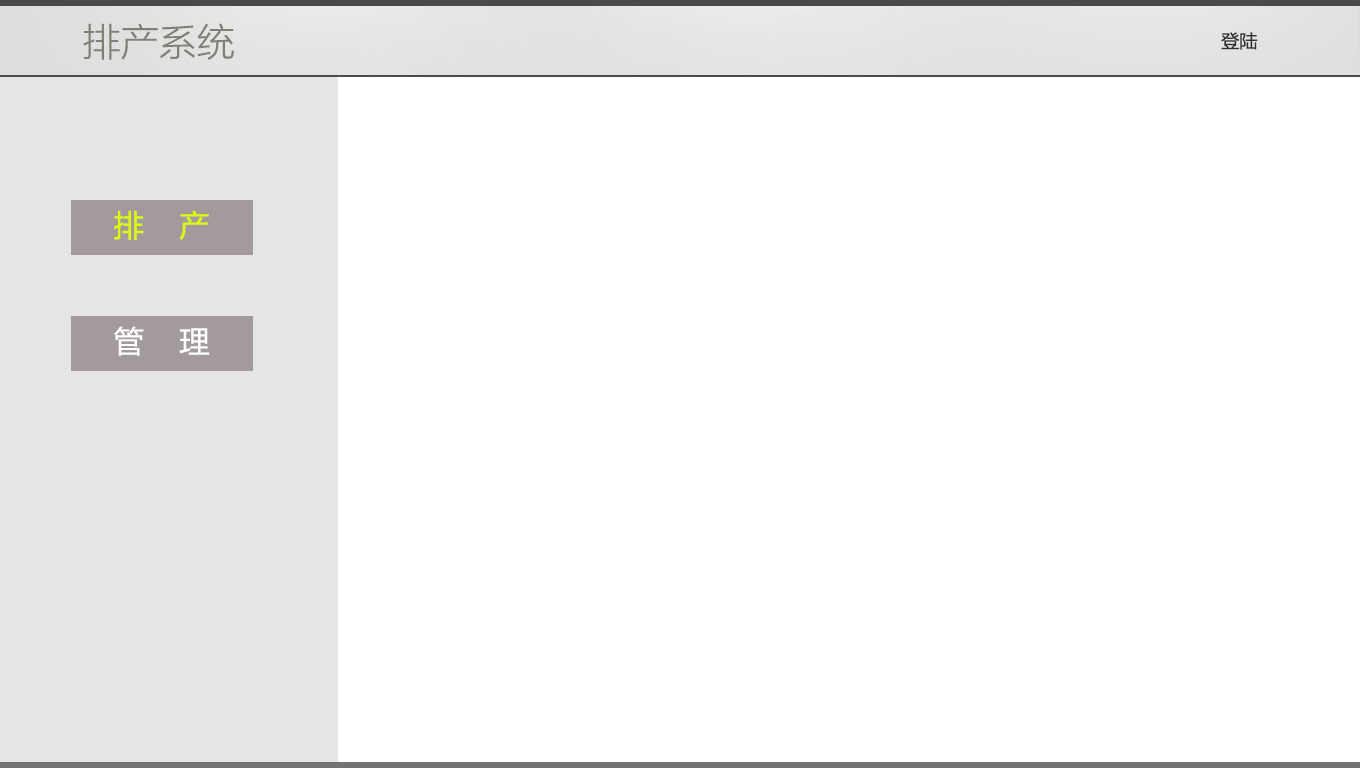
<style>
.page{position:relative;width:1360px;height:768px;background:#ffffff}
.page>*{position:absolute;margin:0}
.t1{font:38px "MicrosoftYaHeiLight";color:#808077}
.t2{font:18px "MicrosoftYaHei";color:#31312e}
.t3{font:30px "MicrosoftYaHei";color:#dcfc02}
.t4{font:30px "MicrosoftYaHei";color:#ffffff}
</style>
<div class="page">
<p class="t1" style="left:83px;top:23px;width:151px;height:37px">排产系统</p>
<p class="t2" style="left:1221px;top:32px;width:37px;height:18px">登陆</p>
<p class="t3" style="left:114px;top:210px;width:95px;height:30px">排    产</p>
<p class="t4" style="left:114px;top:326px;width:96px;height:30px">管    理</p>
</div>
